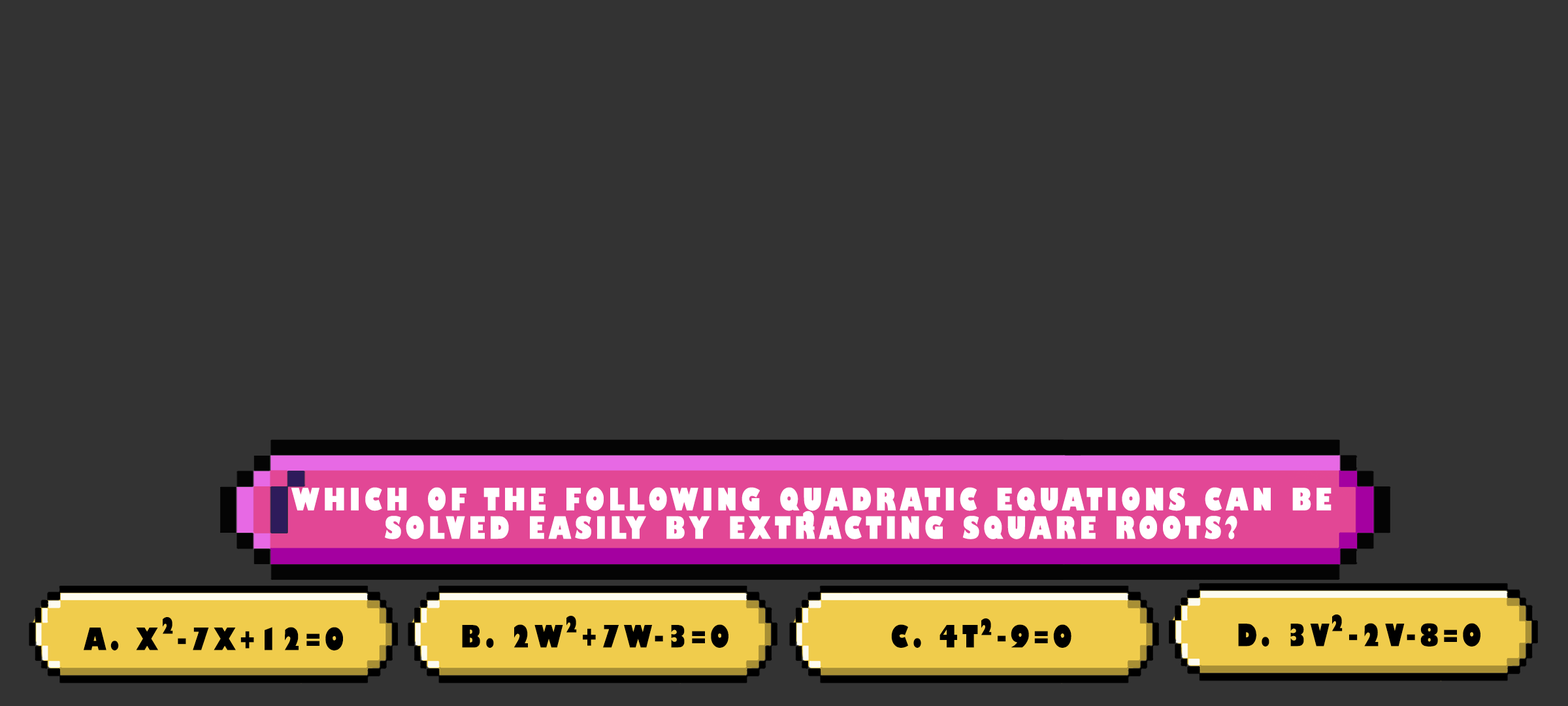
<style>
.page{position:relative;width:1568px;height:706px;background:#333333}
.page>*{position:absolute;margin:0}
.t1{font:30px/28.4px "GillSans-UltraBoldCondensed";letter-spacing:0.115em;color:#ffffff;text-transform:uppercase;scale:1.12 1}
.t2{font:24.5px "GillSans-UltraBoldCondensed";letter-spacing:0.115em;color:#ffffff;text-transform:uppercase;scale:1.12 1}
.t3{font:21.8px "GillSans-UltraBoldCondensed";letter-spacing:0.115em;color:#000000;text-transform:uppercase;scale:1.12 1}
.t4{font:29.9px "GillSans-UltraBoldCondensed";letter-spacing:0.115em;color:#000000;text-transform:uppercase;scale:1.12 1}
</style>
<div class="page">
<p class="t1" style="left:291px;top:487px;width:1040px;height:52px;text-align:center">Which of the following quadratic equations can be solved easily by extracting square roots?</p>
<p class="t2" style="left:803px;top:510px;width:12px;height:20px">2</p>
<p class="t3" style="left:163px;top:617px;width:10px;height:17px">2</p>
<p class="t3" style="left:566px;top:615px;width:11px;height:17px">2</p>
<p class="t3" style="left:1332px;top:614px;width:11px;height:17px">2</p>
<p class="t4" style="left:84px;top:627px;width:259px;height:23px">a. x -7x+12=0</p>
<p class="t4" style="left:462px;top:624px;width:266px;height:23px">b. 2w +7w-3=0</p>
<p class="t4" style="left:891px;top:624px;width:180px;height:23px">c. 4t -9=0</p>
<p class="t3" style="left:981px;top:618px;width:11px;height:17px">2</p>
<p class="t4" style="left:1238px;top:623px;width:242px;height:23px">d. 3v -2v-8=0</p>
</div>
